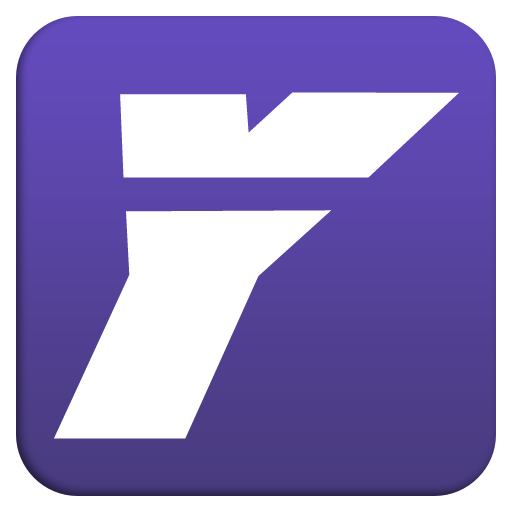
<style>
.page{position:relative;width:512px;height:512px;background:#ffffff}
.page>*{position:absolute;margin:0}
.t1{font:500.1px "BladeRunnerMovieFont";color:#ffffff;font-style:italic}
</style>
<div class="page">
<p class="t1" style="left:54px;top:92px;width:405px;height:347px">Y</p>
</div>
